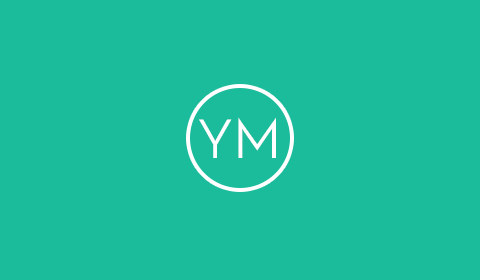
<style>
.page{position:relative;width:480px;height:280px;background:#1abc9c}
.page>*{position:absolute;margin:0}
.t1{font:54px "JosefinSans";color:#ffffff}
</style>
<div class="page">
<p class="t1" style="left:199px;top:117px;width:77px;height:41px">YM</p>
</div>
